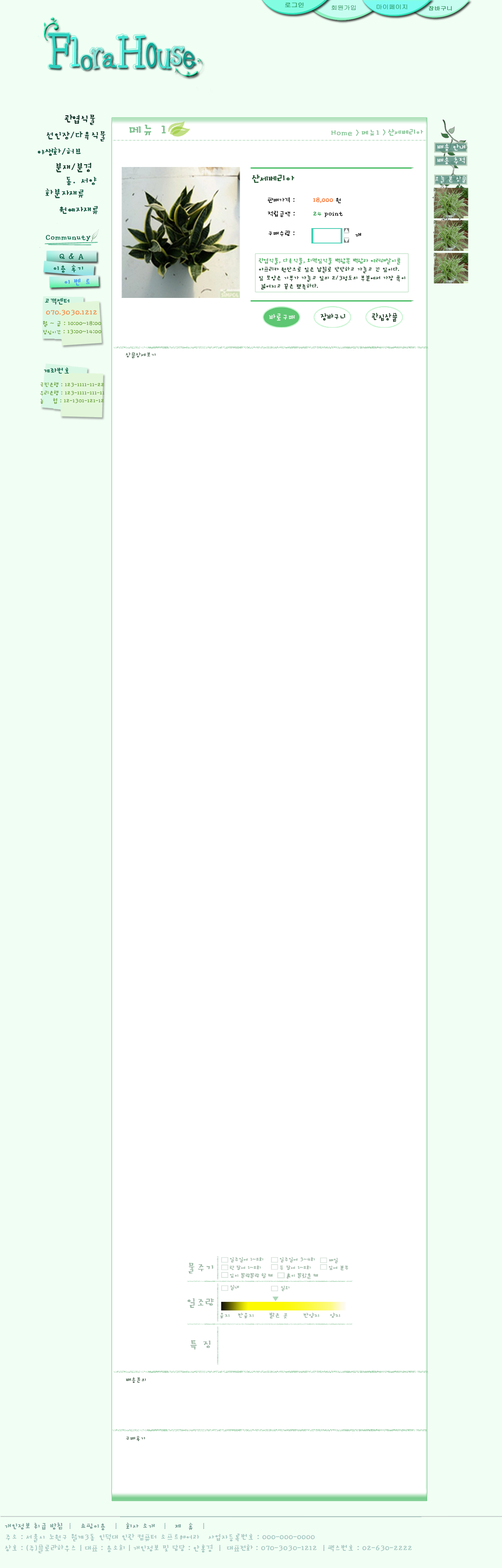
<style>
.page{position:relative;width:502px;height:1568px;background:#ffffff}
.page>*{position:absolute;margin:0}
.t1{font:5.9px "Gulim";color:#198445;font-weight:bold;scale:1.1 1}
.t2{font:5.9px "Gulim";color:#097334;font-weight:bold;scale:1.1 1}
.t3{font:5.3px "Gulim";color:#198445;font-weight:bold;scale:1.13 1}
.t4{font:46.7px "Pinwheel";color:#2ed0bf;font-weight:bold;scale:0.84 1}
.t5{font:40.9px "Pinwheel";color:#4df7e6;font-weight:bold;scale:0.78 1}
.t6{font:24.9px "Pinwheel";color:#10a899;font-weight:bold}
.t7{font:43.2px "Pinwheel";color:#40e0d0;font-weight:bold;scale:0.82 1}
.t8{font:42.1px "Pinwheel";color:#0ba999;font-weight:bold;scale:0.54 1}
.t9{font:31.2px "Pinwheel";color:#40e0d0;font-weight:bold;scale:0.82 1}
.t10{font:31.2px "Pinwheel";color:#06998a;font-weight:bold;scale:0.82 1}
.t11{font:24.6px "Pinwheel";color:#0dc2af;font-weight:bold;scale:0.95 1}
.t12{font:32.5px "Pinwheel";color:#6feadb;font-weight:bold;scale:0.9 1}
.t13{font:11px "SanKrL";color:#012419;font-weight:bold}
.t14{font:17.6px "SanKrL";color:#7fc08f;font-weight:bold}
.t15{font:11px "SanKrL";color:#0e3e2f;font-weight:bold}
.t16{font:9.8px "SanKrL";color:#7fc08f;font-weight:bold}
.t17{font:11px "SanKrL";color:#074d37;font-weight:bold}
.t18{font:9.1px "SanKrL";color:#f5faf9;font-weight:bold;scale:0.97 1}
.t19{font:11px "SanKrL";color:#05301e;font-weight:bold}
.t20{font:11.8px "SanKrL";color:#1b522a;font-weight:bold}
.t21{font:7.8px "SanKrL";color:#f5faf9;font-weight:bold;scale:0.97 1}
.t22{font:7.8px "SanKrL";color:#040404;font-weight:bold}
.t23{font:7.8px "SanKrL";color:#f9590b;font-weight:bold}
.t24{font:7.8px "SanKrL";color:#020202;font-weight:bold}
.t25{font:7.8px "SanKrL";color:#000000;font-weight:bold}
.t26{font:7.8px "SanKrL";color:#138f34;font-weight:bold}
.t27{font:8.6px "SanKrL";color:#000000;font-weight:bold}
.t28{font:9px "SanKrL";color:#0b6549;font-weight:bold}
.t29{font:9.8px "SanKrL";color:#0b6549;font-weight:bold}
.t30{font:7.1px "SanKrL";color:#072c0f;font-weight:bold}
.t31{font:7.1px "SanKrL";color:#36a24c;font-weight:bold}
.t32{font:9.8px "SanKrL";color:#3f91f7;font-weight:bold}
.t33{font:9px "SanKrL";color:#f58845;font-weight:bold}
.t34{font:10.3px "SanKrL";color:#f2f4f2;font-weight:bold;scale:0.87 1}
.t35{font:10.3px "SanKrL";color:#183a1f;font-weight:bold;scale:0.87 1}
.t36{font:7.1px "SanKrL";color:#669d33;font-weight:bold}
.t37{font:6.3px "SanKrL";color:#669d33;font-weight:bold}
.t38{font:7.1px "SanKrL";color:#46614c;font-weight:bold}
.t39{font:6.7px "SanKrL";color:#669d33;font-weight:bold}
.t40{font:11.3px "SanKrL";color:#9cb6a4;font-weight:bold;scale:1.12 1}
.t41{font:5.6px "SanKrL";color:#9cb6a4;font-weight:bold;scale:1.12 1}
.t42{font:6.8px "SanKrL";color:#9cb6a4;font-weight:bold;scale:1.12 1}
.t43{font:9px "SanKrL";color:#a1c4bf;font-weight:bold}
.t44{font:9px "SanKrL";color:#719891;font-weight:bold}
</style>
<div class="page">
<p class="t1" style="left:285px;top:2px;width:18px;height:5px">로그인</p>
<p class="t2" style="left:331px;top:5px;width:25px;height:5px">회원가입</p>
<p class="t2" style="left:376px;top:4px;width:31px;height:5px">마이페이지</p>
<p class="t3" style="left:428px;top:6px;width:24px;height:5px">장바구니</p>
<p class="t4" style="left:47px;top:33px;width:148px;height:37px">F<span class="t5">l</span><span class="t6">o   </span><span class="t7">H</span><span class="t8">o</span><span class="t9">u </span><span class="t10">e</span></p>
<p class="t11" style="left:102px;top:53px;width:14px;height:14px;rotate:5deg">a</p>
<p class="t12" style="left:170px;top:47px;width:14px;height:18px;rotate:6deg">s</p>
<p class="t13" style="left:65px;top:114px;width:30px;height:11px">관엽식물</p>
<p class="t14" style="left:129px;top:125px;width:37px;height:11px">메뉴 1</p>
<p class="t15" style="left:47px;top:131px;width:58px;height:11px">선인장/다육식물</p>
<p class="t16" style="left:331px;top:129px;width:28px;height:7px">Home &gt;</p>
<p class="t16" style="left:361px;top:129px;width:24px;height:7px">메뉴1 &gt;</p>
<p class="t16" style="left:388px;top:129px;width:35px;height:7px">산세베리아</p>
<p class="t17" style="left:38px;top:147px;width:43px;height:9px">야생화/허브</p>
<p class="t18" style="left:437px;top:144px;width:28px;height:7px">배송 안내</p>
<p class="t18" style="left:437px;top:157px;width:28px;height:7px">배송 추적</p>
<p class="t19" style="left:56px;top:163px;width:35px;height:9px">분재/분경</p>
<p class="t17" style="left:67px;top:177px;width:30px;height:8px">동．서양</p>
<p class="t20" style="left:252px;top:174px;width:42px;height:9px">산세베리아</p>
<p class="t21" style="left:435px;top:176px;width:31px;height:7px">오늘 본 상품</p>
<p class="t17" style="left:45px;top:189px;width:38px;height:9px">화분자재류</p>
<p class="t22" style="left:267px;top:197px;width:74px;height:6px">판매가격 :       <span class="t23">18,000 </span><span class="t24">원</span></p>
<p class="t17" style="left:60px;top:206px;width:38px;height:8px">원예자재류</p>
<p class="t25" style="left:268px;top:211px;width:75px;height:6px">적립금액 : <span class="t26">      24 </span>point</p>
<p class="t25" style="left:269px;top:230px;width:25px;height:6px">구매수량 :</p>
<p class="t27" style="left:355px;top:233px;width:6px;height:4px">개</p>
<p class="t28" style="left:46px;top:235px;width:45px;height:6px">Communuty</p>
<p class="t29" style="left:60px;top:253px;width:23px;height:7px">Q &amp; A</p>
<p class="t30" style="left:258px;top:258px;width:147px;height:32px"><span class="t31">관엽식물, 다육식물, 외떡잎식물 백합목 백합과 여러해살이풀<br></span>아프리카 원산으로 잎은 납질로 단단하고 가늘고 긴 잎이다. <br>잎 모양은 기부가 가늘고 잎의 2/3정도의 부분에서 가장 폭이<br> 넓어지고 끝은 뾰족하다.</p>
<p class="t29" style="left:54px;top:265px;width:29px;height:8px">이용 후기</p>
<p class="t32" style="left:65px;top:278px;width:25px;height:8px">이 벤 트</p>
<p class="t28" style="left:45px;top:298px;width:24px;height:7px">고객센터</p>
<p class="t33" style="left:46px;top:310px;width:51px;height:6px">070.3030.1212</p>
<p class="t34" style="left:269px;top:313px;width:26px;height:8px">바로구매</p>
<p class="t35" style="left:320px;top:313px;width:25px;height:8px">장바구니</p>
<p class="t35" style="left:372px;top:313px;width:25px;height:9px">관심상품</p>
<p class="t36" style="left:43px;top:321px;width:59px;height:14px">월 ~ 금 : 10:00~18:00<br><span class="t37">점심시간</span> : 13:00~14:00</p>
<p class="t38" style="left:126px;top:352px;width:30px;height:6px">상품상세보기</p>
<p class="t28" style="left:44px;top:367px;width:25px;height:7px">계좌번호</p>
<p class="t39" style="left:40px;top:382px;width:64px;height:22px">국민은행 : 123-1111-11-22<br>우리은행 : 123-1111-111-11<br>농    협 : 12-1301-121-12</p>
<p class="t40" style="left:188px;top:1263px;width:25px;height:11px">물주기</p>
<p class="t41" style="left:229px;top:1265px;width:32px;height:5px">한 달에 1~2회</p>
<p class="t41" style="left:230px;top:1257px;width:33px;height:6px">일주일에 1~2회</p>
<p class="t41" style="left:279px;top:1257px;width:36px;height:6px">일주일에 3~4회</p>
<p class="t41" style="left:280px;top:1265px;width:30px;height:5px">두 달에 1~2회</p>
<p class="t41" style="left:328px;top:1265px;width:20px;height:5px">잎에 분무</p>
<p class="t41" style="left:328px;top:1258px;width:10px;height:5px">매일</p>
<p class="t41" style="left:230px;top:1273px;width:42px;height:5px">잎이 말랑말랑 할 때</p>
<p class="t41" style="left:286px;top:1273px;width:32px;height:6px">흙이 말랐을 때</p>
<p class="t41" style="left:230px;top:1285px;width:9px;height:5px">실내</p>
<p class="t41" style="left:281px;top:1286px;width:8px;height:5px">실외</p>
<p class="t40" style="left:187px;top:1298px;width:27px;height:10px">일조량</p>
<p class="t42" style="left:220px;top:1312px;width:120px;height:7px">음지   반음지      밝은 곳      반양지    양지</p>
<p class="t40" style="left:190px;top:1340px;width:21px;height:10px">특 징</p>
<p class="t38" style="left:126px;top:1377px;width:20px;height:6px">배송문의</p>
<p class="t38" style="left:126px;top:1436px;width:19px;height:5px">구매후기</p>
<p class="t43" style="left:5px;top:1523px;width:407px;height:30px"><span class="t44">개인정보 취급 방침</span>  |   <span class="t44">쇼핑이용</span>   |   <span class="t44">회사 소개 </span>  |   <span class="t44">제  휴</span>   |<br>주소 : 서울시 노원구 월계3동 인덕대 인관 컴퓨터 소프트웨어과   사업자등록번호 : 000-000-0000   <br>상호 : (주)플로라하우스 | 대표 : 용소희 | 개인정보 및 담당 : 안홍경  |  대표전화 : 070-3030-1212  | 팩스번호 : 02-630-2222</p>
</div>
